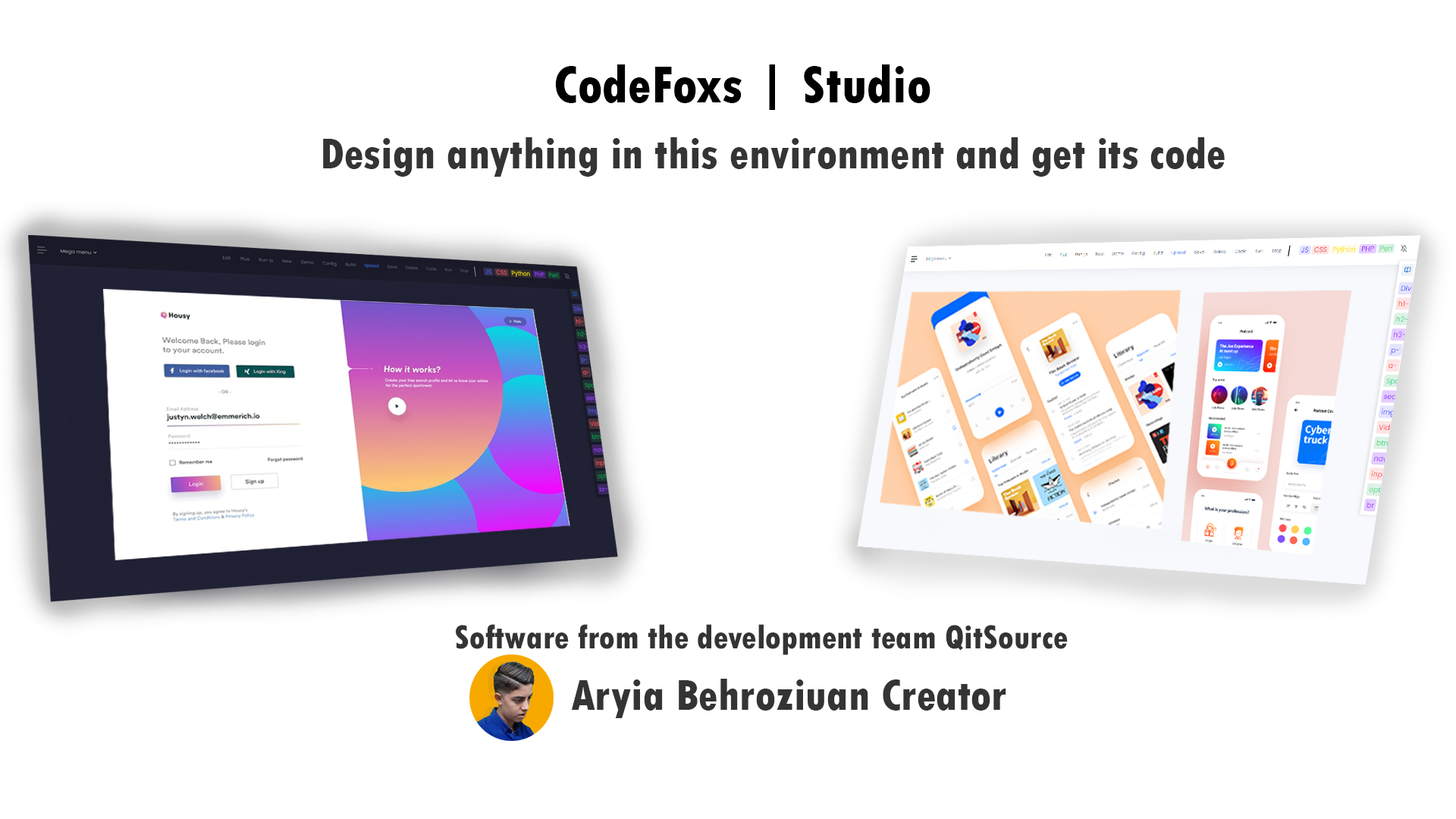
<style>
.page{position:relative;width:1456px;height:819px;background:#ffffff}
.page>*{position:absolute;margin:0}
.t1{font:54.6px "TwCenMT-CondensedExtraBold";color:#000000}
.t2{font:45.5px "TwCenMT-CondensedExtraBold";color:#343434}
.t3{font:34.6px "TwCenMT-CondensedExtraBold";color:#343434}
</style>
<div class="page">
<p class="t1" style="left:555px;top:64px;width:375px;height:46px">CodeFoxs | Studio</p>
<p class="t2" style="left:323px;top:137px;width:902px;height:40px">Design anything in this environment and get its code</p>
<p class="t3" style="left:456px;top:624px;width:612px;height:31px">Software from the development team QitSource</p>
<p class="t2" style="left:571px;top:679px;width:435px;height:39px">Aryia Behroziuan Creator</p>
</div>
